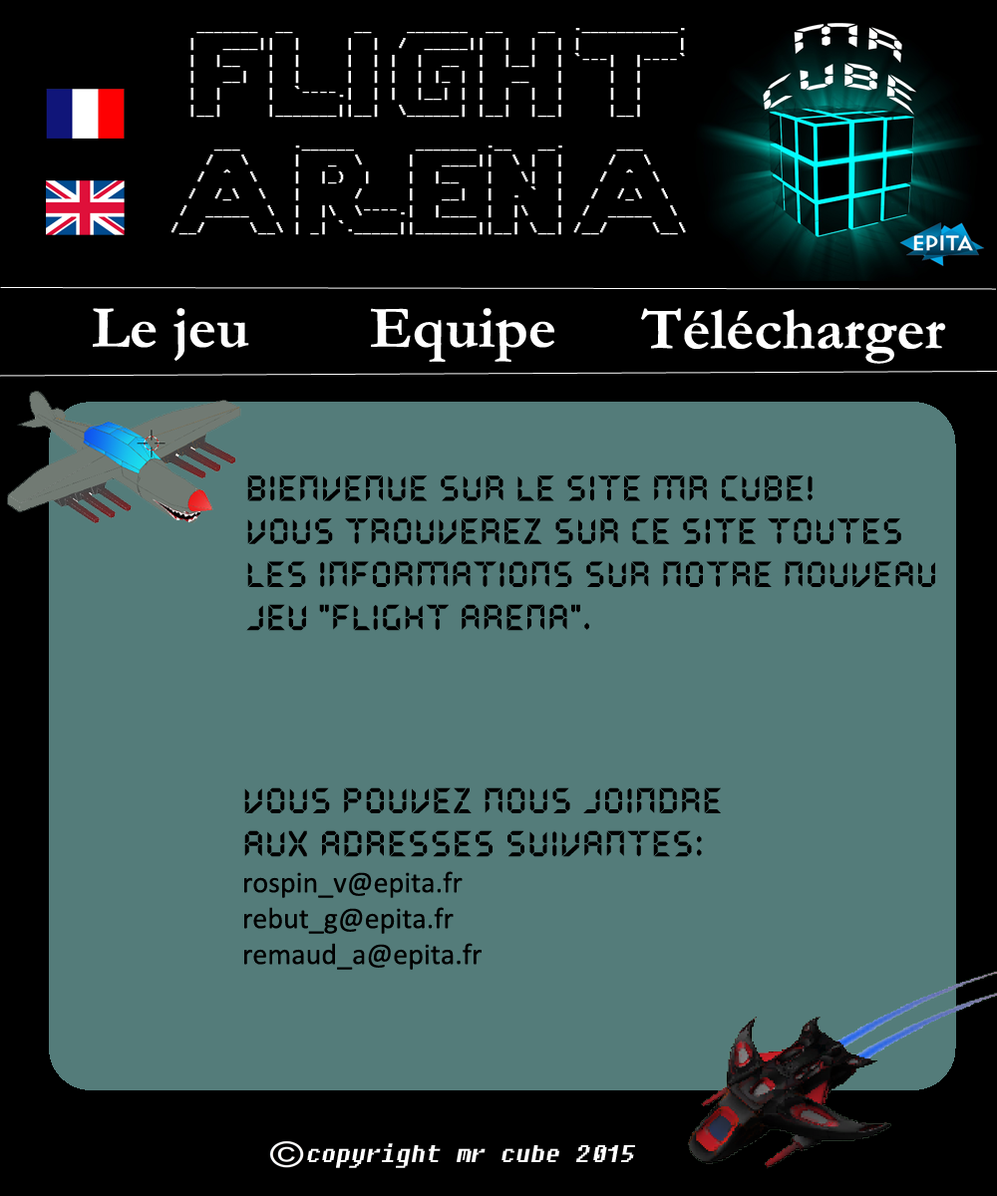
<style>
.page{position:relative;width:997px;height:1196px;background:#547c7a}
.page>*{position:absolute;margin:0}
.t1{font:14px "Fixedsys";color:#ffffff;font-weight:bold}
.t2{font:59.8px "Garamond-Bold";color:#ffffff}
.t3{font:35.9px "QuartzMS";color:#000000}
.t4{font:29.9px "Calibri";color:#000000}
.t5{font:23.9px "Fixedsys";color:#ffffff;font-style:italic}
</style>
<div class="page">
<p class="t1" style="left:171px;top:28px;width:515px;height:207px">_______  __       __    _______  __    __  .___________.<br>  |   ____||  |     |  |  /  _____||  |  |  | |           |<br>  |  |__   |  |     |  | |  |  __  |  |__|  | `---|  |----`<br>  |   __|  |  |     |  | |  | |_ | |   __   |     |  |     <br>  |  |     |  `----.|  | |  |__| | |  |  |  |     |  |     <br>  |__|     |_______||__|  \______| |__|  |__|     |__|     <br>                                                         <br>     ___      .______       _______ .__   __.      ___      <br>    /   \     |   _  \     |   ____||  \ |  |     /   \     <br>   /  ^  \    |  |_)  |    |  |__   |   \|  |    /  ^  \    <br>  /  /_\  \   |      /     |   __|  |  . `  |   /  /_\  \   <br> /  _____  \  |  |\  \----.|  |____ |  |\   |  /  _____  \  <br>/__/     \__\ | _| `._____||_______||__| \__| /__/     \__\</p>
<p class="t2" style="left:93px;top:308px;width:156px;height:53px">Le jeu</p>
<p class="t2" style="left:371px;top:308px;width:184px;height:54px">Equipe</p>
<p class="t2" style="left:641px;top:308px;width:305px;height:56px">Télécharger</p>
<p class="t3" style="left:246px;top:475px;width:689px;height:156px">Bienvenue sur le site Mr cube!<br>Vous trouverez sur ce site toutes <br>les informations sur notre nouveau <br>jeu "Flight Arena".</p>
<p class="t4" style="left:244px;top:788px;width:477px;height:182px"><span class="t3">Vous pouvez nous joindre <br>aux adresses suivantes:<br></span>rospin_v@epita.fr<br>rebut_g@epita.fr<br>remaud_a@epita.fr</p>
<p class="t5" style="left:307px;top:1143px;width:328px;height:25px">copyright mr cube 2015</p>
</div>
